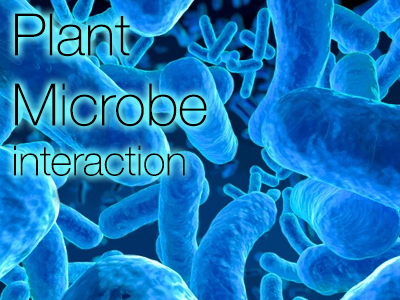
<style>
.page{position:relative;width:400px;height:300px}
.page>*{position:absolute;margin:0}
.t1{font:58.3px "HelveticaNeue-Thin";color:#000000}
.t2{font:41.7px "HelveticaNeue-Thin";color:#000000}
</style>
<div class="page">
<p class="t1" style="left:14px;top:13px;width:193px;height:163px">Plant<br>Microbe<br><span class="t2">interaction</span></p>
</div>
